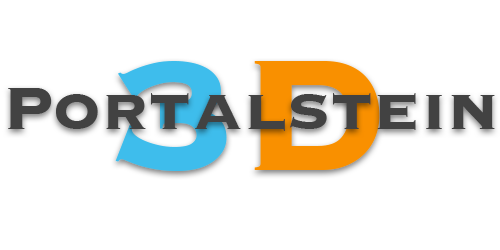
<style>
.page{position:relative;width:500px;height:250px;background:#ffffff}
.page>*{position:absolute;margin:0}
.t1{font:207.4px "Copperplate-Bold";color:#3ebdec}
.t2{font:207.4px "Copperplate-Bold";color:#f99000}
.t3{font:77.8px "Copperplate-Bold";color:#424242}
</style>
<div class="page">
<p class="t1" style="left:115px;top:61px;width:265px;height:110px">3<span class="t2">D</span></p>
<p class="t3" style="left:8px;top:88px;width:487px;height:43px">Portalstein</p>
</div>
